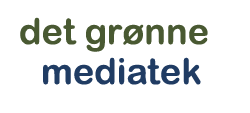
<style>
.page{position:relative;width:250px;height:113px;background:#ffffff}
.page>*{position:absolute;margin:0}
.t1{font:36px "ArialRoundedMTBold";color:#495932}
.t2{font:36px "ArialRoundedMTBold";color:#203c63}
</style>
<div class="page">
<p class="t1" style="left:20px;top:17px;width:188px;height:35px">det grønne</p>
<p class="t2" style="left:43px;top:57px;width:158px;height:28px">mediatek</p>
</div>
